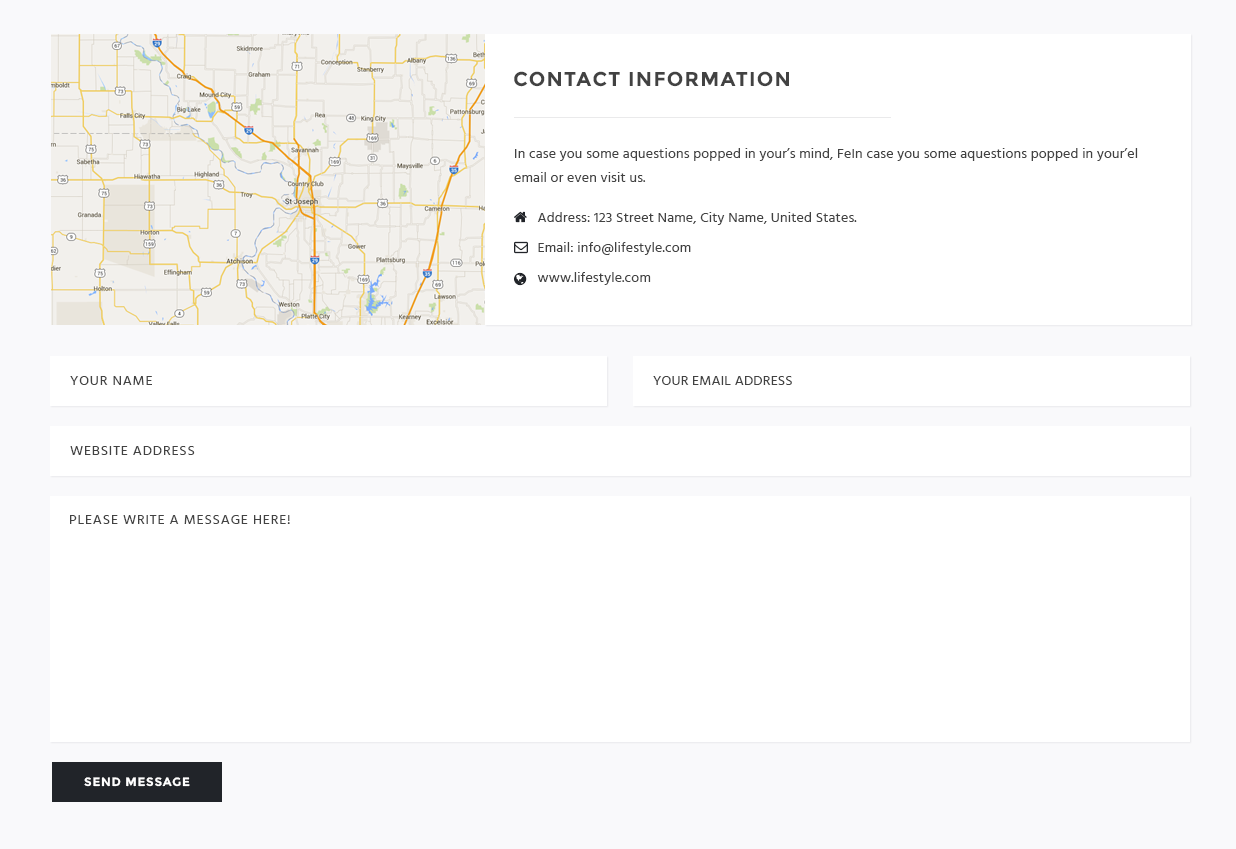
<style>
.page{position:relative;width:1236px;height:849px;background:#ffffff}
.page>*{position:absolute;margin:0}
.t1{font:20px "Montserrat-Bold";letter-spacing:0.06em;color:#424242;text-transform:uppercase}
.t2{font:14px/24px "Hind-Regular";letter-spacing:0.012em;color:#424242}
.t3{font:14px "Hind-Regular";letter-spacing:0.012em;color:#424242}
.t4{font:14px "Hind-Regular";letter-spacing:0.06em;color:#424242;text-transform:uppercase}
.t5{font:14px "Hind-Regular";letter-spacing:0.012em;color:#424242;text-transform:uppercase}
.t6{font:12px "Montserrat-Bold";letter-spacing:0.06em;color:#ffffff;text-transform:uppercase}
</style>
<div class="page">
<p class="t1" style="left:514px;top:71px;width:275px;height:16px">Contact information</p>
<p class="t2" style="left:514px;top:148px;width:624px;height:34px">In case you some aquestions popped in your’s mind, FeIn case you some aquestions popped in your’el email or even visit us.</p>
<p class="t3" style="left:537px;top:212px;width:320px;height:13px">Address: 123 Street Name, City Name, United States.</p>
<p class="t3" style="left:538px;top:242px;width:153px;height:13px">Email: info@lifestyle.com</p>
<p class="t3" style="left:537px;top:272px;width:114px;height:13px">www.lifestyle.com</p>
<p class="t4" style="left:70px;top:376px;width:82px;height:9px">Your Name</p>
<p class="t5" style="left:653px;top:376px;width:139px;height:9px">Your Email Address</p>
<p class="t4" style="left:70px;top:446px;width:125px;height:9px">Website Address</p>
<p class="t4" style="left:70px;top:515px;width:220px;height:9px">Please write a message here!</p>
<p class="t6" style="left:84px;top:777px;width:106px;height:10px">send message</p>
</div>
